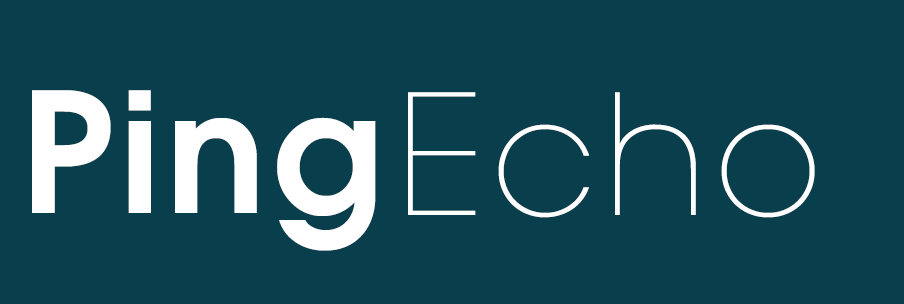
<style>
.page{position:relative;width:904px;height:304px;background:#093f4c}
.page>*{position:absolute;margin:0}
.t1{font:166px "AvantGarde-Demi";letter-spacing:0.04em;color:#ffffff}
.t2{font:166px "AvantGardeLT-ExtraLight";letter-spacing:0.04em;color:#ffffff}
</style>
<div class="page">
<p class="t1" style="left:32px;top:90px;width:344px;height:161px">Ping</p>
<p class="t2" style="left:408px;top:92px;width:407px;height:126px">Echo</p>
</div>
